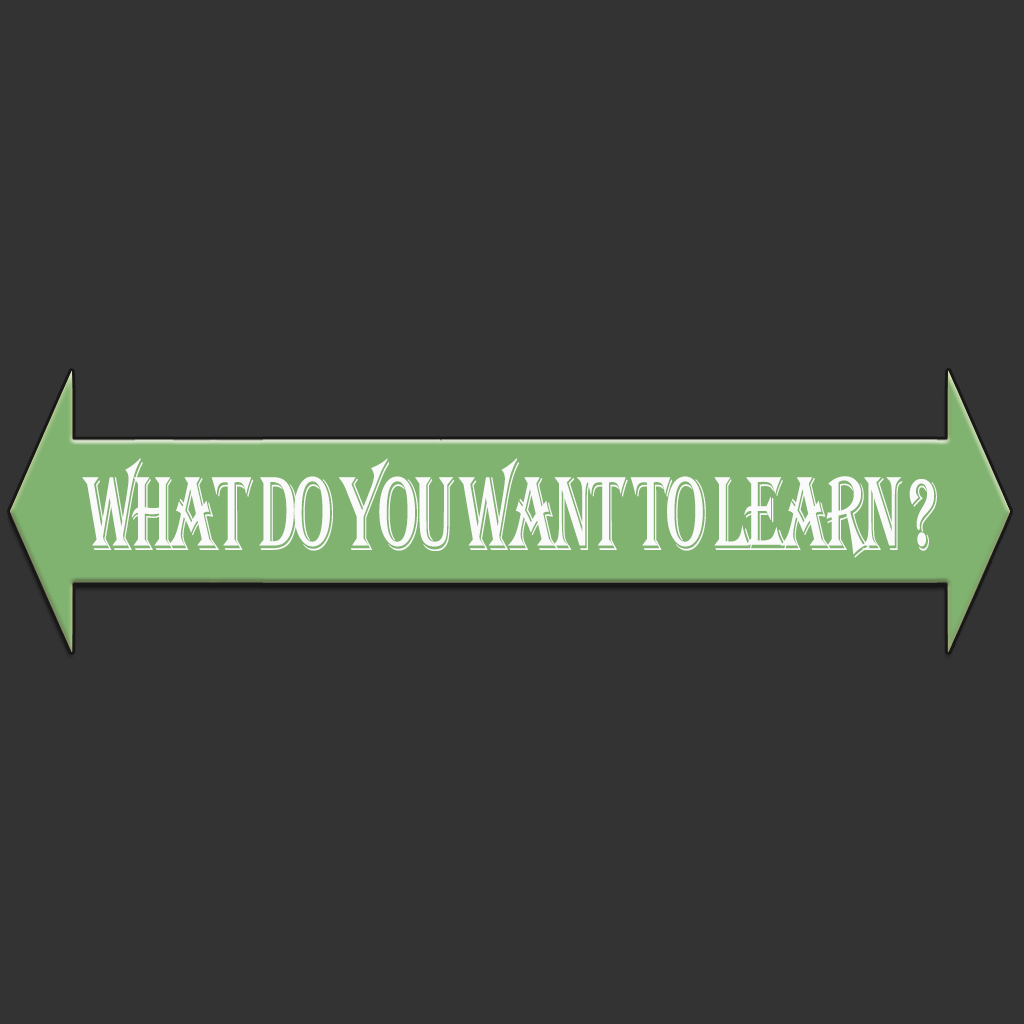
<style>
.page{position:relative;width:1024px;height:1024px;background:#333333}
.page>*{position:absolute;margin:0}
.t1{font:108.7px "Algerian";letter-spacing:-0.08em;color:#fafafa;scale:0.61 1}
</style>
<div class="page">
<p class="t1" style="left:82px;top:458px;width:855px;height:100px">What do you want to learn ?</p>
</div>
